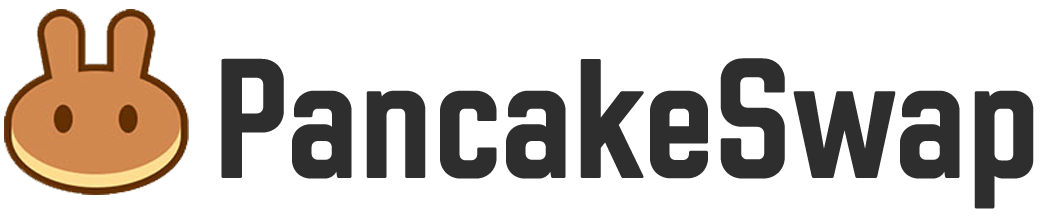
<style>
.page{position:relative;width:1040px;height:216px;background:#ffffff}
.page>*{position:absolute;margin:0}
.t1{font:170px "ChromoxomePro-Bold";color:#2e2e2e}
</style>
<div class="page">
<p class="t1" style="left:221px;top:58px;width:813px;height:151px">PancakeSwap</p>
</div>
